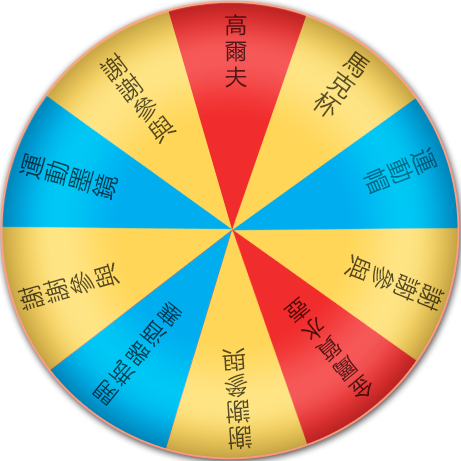
<style>
.page{position:relative;width:461px;height:461px}
.page>*{position:absolute;margin:0}
.t1{font:22px/26px "MicrosoftYaHei";color:#541616}
.t2{font:24px/25.9px "MicrosoftYaHei";color:#584b23}
.t3{font:24px/25.3px "MicrosoftYaHei";color:#574c26}
.t4{font:24px/25.7px "MicrosoftYaHei";color:#006886}
.t5{font:24px/25.3px "MicrosoftYaHei";color:#003e52}
.t6{font:24px/26px "MicrosoftYaHei";color:#584a20}
.t7{font:24px/26px "MicrosoftYaHei";color:#584a21}
.t8{font:22px/25.3px "MicrosoftYaHei";color:#003c52}
.t9{font:22px/25.2px "MicrosoftYaHei";color:#530d0d}
.t10{font:24px/25.9px "MicrosoftYaHei";color:#584a20}
</style>
<div class="page">
<p class="t1" style="left:225px;top:14px;width:22px;height:74px;text-align:center">高<br>爾<br>夫</p>
<p class="t2" style="left:99px;top:52px;width:78px;height:93px;text-align:center;rotate:-38deg">謝<br>謝<br>參<br>與</p>
<p class="t3" style="left:313px;top:51px;width:58px;height:66px;text-align:center;rotate:36deg">馬<br>克<br>杯</p>
<p class="t4" style="left:363px;top:147px;width:75px;height:48px;text-align:center;rotate:67deg">運<br>動<br>帽</p>
<p class="t5" style="left:18px;top:153px;width:101px;height:47px;text-align:center;rotate:-74deg">運<br>動<br>墨<br>鏡</p>
<p class="t6" style="left:343px;top:254px;width:102px;height:57px;text-align:center;rotate:112deg">謝<br>謝<br>參<br>與</p>
<p class="t7" style="left:17px;top:262px;width:103px;height:49px;text-align:center;rotate:-106deg">謝<br>謝<br>參<br>與</p>
<p class="t8" style="left:92px;top:301px;width:91px;height:105px;text-align:center;rotate:-141deg">開<br>瓶<br>器<br>酒<br>塞</p>
<p class="t9" style="left:283px;top:296px;width:89px;height:101px;text-align:center;rotate:140deg">金<br>屬<br>質<br>水<br>壺</p>
<p class="t10" style="left:222px;top:347px;width:30px;height:103px;text-align:center;rotate:176deg">謝<br>謝<br>參<br>與</p>
</div>
